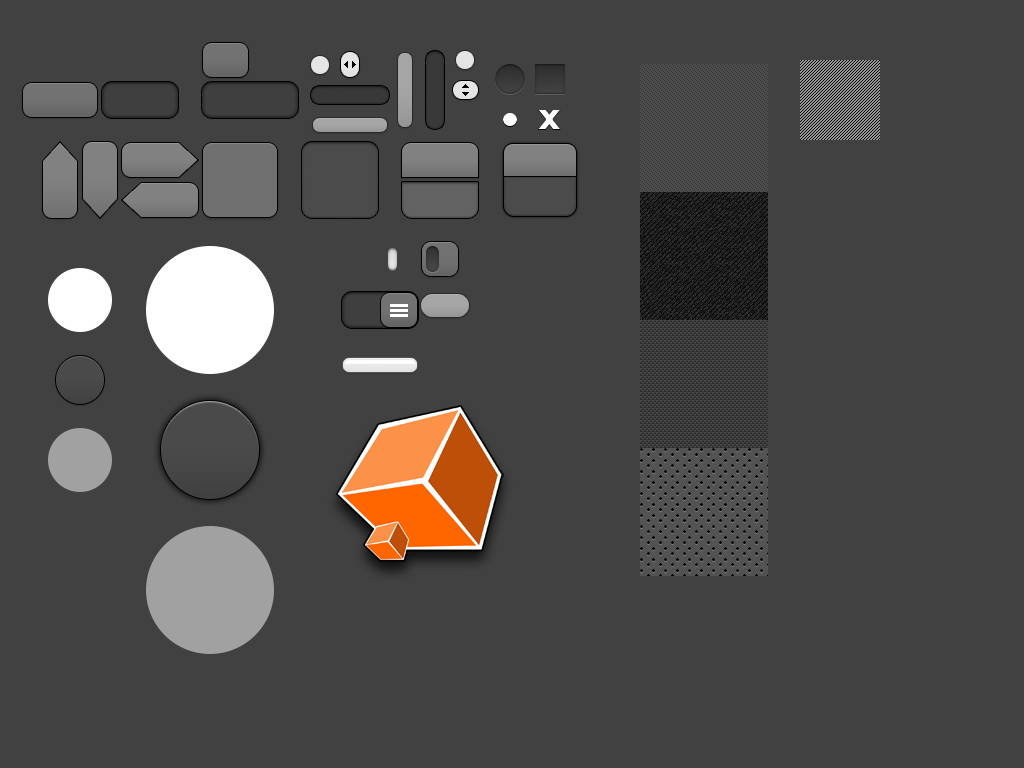
<style>
.page{position:relative;width:1024px;height:768px;background:#414141}
.page>*{position:absolute;margin:0}
.t1{font:28.7px "Robotica";color:#fefefe}
</style>
<div class="page">
<p class="t1" style="left:538px;top:110px;width:23px;height:20px">X</p>
</div>
